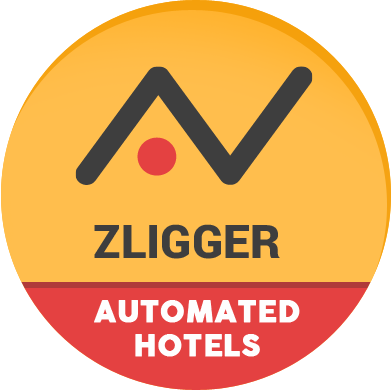
<style>
.page{position:relative;width:391px;height:390px;background:#ffbe4d}
.page>*{position:absolute;margin:0}
.t1{font:29.1px/35.3px "COCOGOOSE";color:#fefefe;font-weight:bold}
</style>
<div class="page">
<p class="t1" style="left:94px;top:300px;width:206px;height:57px;text-align:center">AUTOMATED<br>HOTELS</p>
</div>
